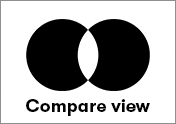
<style>
.page{position:relative;width:176px;height:124px;background:#ffffff}
.page>*{position:absolute;margin:0}
.t1{font:18px "GTWalsheimPro-Bold";color:#010101}
</style>
<div class="page">
<p class="t1" style="left:26px;top:99px;width:124px;height:17px">Compare view</p>
</div>
